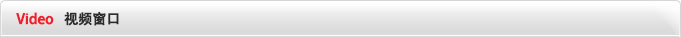
<style>
.page{position:relative;width:681px;height:37px}
.page>*{position:absolute;margin:0}
.t1{font:14px "AdobeHeitiStd-Regular";letter-spacing:-0.02em;color:#ef212e;font-weight:bold}
.t2{font:14px "AdobeHeitiStd-Regular";letter-spacing:-0.02em;color:#2c2c2c;font-weight:bold}
</style>
<div class="page">
<p class="t1" style="left:16px;top:12px;width:38px;height:13px">Video</p>
<p class="t2" style="left:64px;top:11px;width:55px;height:15px">视频窗口</p>
</div>
